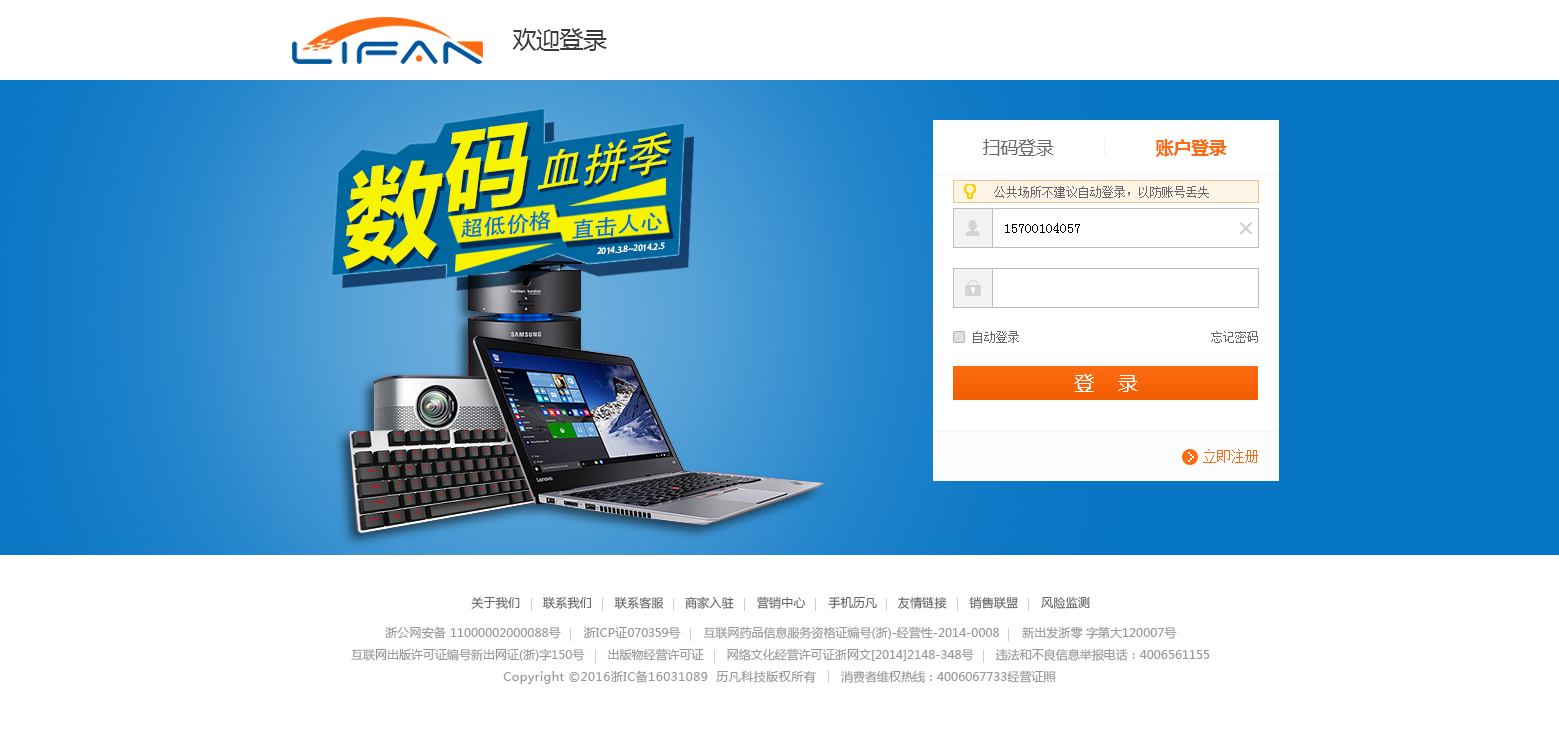
<style>
.page{position:relative;width:1559px;height:743px;background:#ffffff}
.page>*{position:absolute;margin:0}
.t1{font:24px "MicrosoftYaHei";letter-spacing:-0.02em;color:#393939}
.t2{font:89.8px "MicrosoftYaHei-Bold";color:#f8f400;font-style:italic}
.t3{font:46.4px "AdobeHeitiStd-Regular";color:#f8f400}
.t4{font:18px "MicrosoftYaHei";letter-spacing:-0.02em;color:#666666}
.t5{font:18px "MicrosoftYaHei-Bold";letter-spacing:-0.02em;color:#fc6b12}
.t6{font:103.7px "MicrosoftYaHei-Bold";color:#f8f400;font-style:italic;scale:0.93 1}
.t7{font:21.2px "AdobeHeitiStd-Regular";color:#0675c4;font-style:italic;scale:1.08 1}
.t8{font:14px "SimSun";color:#000000}
.t9{font:8.1px "AdobeHeitiStd-Regular";color:#ffffff;font-style:italic}
.t10{font:12px "SimSun";color:#666666}
.t11{font:20px "MicrosoftYaHei";letter-spacing:0.02em;color:#ffffff}
.t12{font:14px "SimSun";color:#fc6b12}
.t13{font:12px "MicrosoftYaHei";letter-spacing:0.02em;color:#666666}
.t14{font:12px "MicrosoftYaHei";color:#999999}
.t15{font:12px "MicrosoftYaHei";letter-spacing:0.02em;color:#999999}
.t16{font:12px "MicrosoftYaHei";letter-spacing:-0.02em;color:#999999}
.t17{font:12px "MicrosoftYaHei";letter-spacing:0.04em;color:#999999}
</style>
<div class="page">
<p class="t1" style="left:512px;top:28px;width:95px;height:23px">欢迎登录</p>
<p class="t2" style="left:445px;top:122px;width:83px;height:90px;rotate:-7deg">码</p>
<p class="t3" style="left:537px;top:132px;width:134px;height:58px;rotate:-9deg">血拼季</p>
<p class="t4" style="left:983px;top:139px;width:71px;height:17px">扫码登录</p>
<p class="t5" style="left:1155px;top:139px;width:72px;height:18px">账户登录</p>
<p class="t6" style="left:342px;top:160px;width:101px;height:110px;rotate:-7deg">数</p>
<p class="t7" style="left:461px;top:210px;width:90px;height:28px;rotate:-6deg">超低价格</p>
<p class="t7" style="left:572px;top:212px;width:90px;height:27px;rotate:-5deg">直击人心</p>
<p class="t8" style="left:1005px;top:223px;width:75px;height:10px">15700104057</p>
<p class="t9" style="left:597px;top:242px;width:68px;height:13px;rotate:-5deg">2014.3.8~2014.2.5</p>
<p class="t10" style="left:973px;top:331px;width:46px;height:12px">自动登录</p>
<p class="t10" style="left:1211px;top:331px;width:47px;height:12px">忘记密码</p>
<p class="t11" style="left:1074px;top:374px;width:64px;height:18px">登    录</p>
<p class="t12" style="left:1203px;top:449px;width:55px;height:14px">立即注册</p>
<p class="t13" style="left:471px;top:596px;width:619px;height:13px">关于我们      联系我们      联系客服     商家入驻      营销中心      手机历凡     友情链接      销售联盟      风险监测</p>
<p class="t14" style="left:385px;top:626px;width:792px;height:13px"><span class="t15">浙公网安备 </span>11000002000088<span class="t15">号      浙ICP证</span><span class="t16">070359号     </span>互联网药品信息服务资格证编号(<span class="t15">浙</span>)-经营性-2014-0008      新出发<span class="t15">浙</span>零 字第大120007号</p>
<p class="t14" style="left:351px;top:648px;width:859px;height:13px">互联网出版许可证编号新出网证(<span class="t15">浙</span>)字150号       出版物经营许可证       网络文化经营许可证<span class="t15">浙</span>网文[2014]2148-348号       违法和不良信息举报电话：4006561155</p>
<p class="t17" style="left:503px;top:670px;width:553px;height:14px"><span class="t14"><br><br></span>Copyright ©2016浙IC备16031089  历凡科技版权所有<span class="t14">       消费者维权热线：4006067733经营证照</span></p>
</div>
